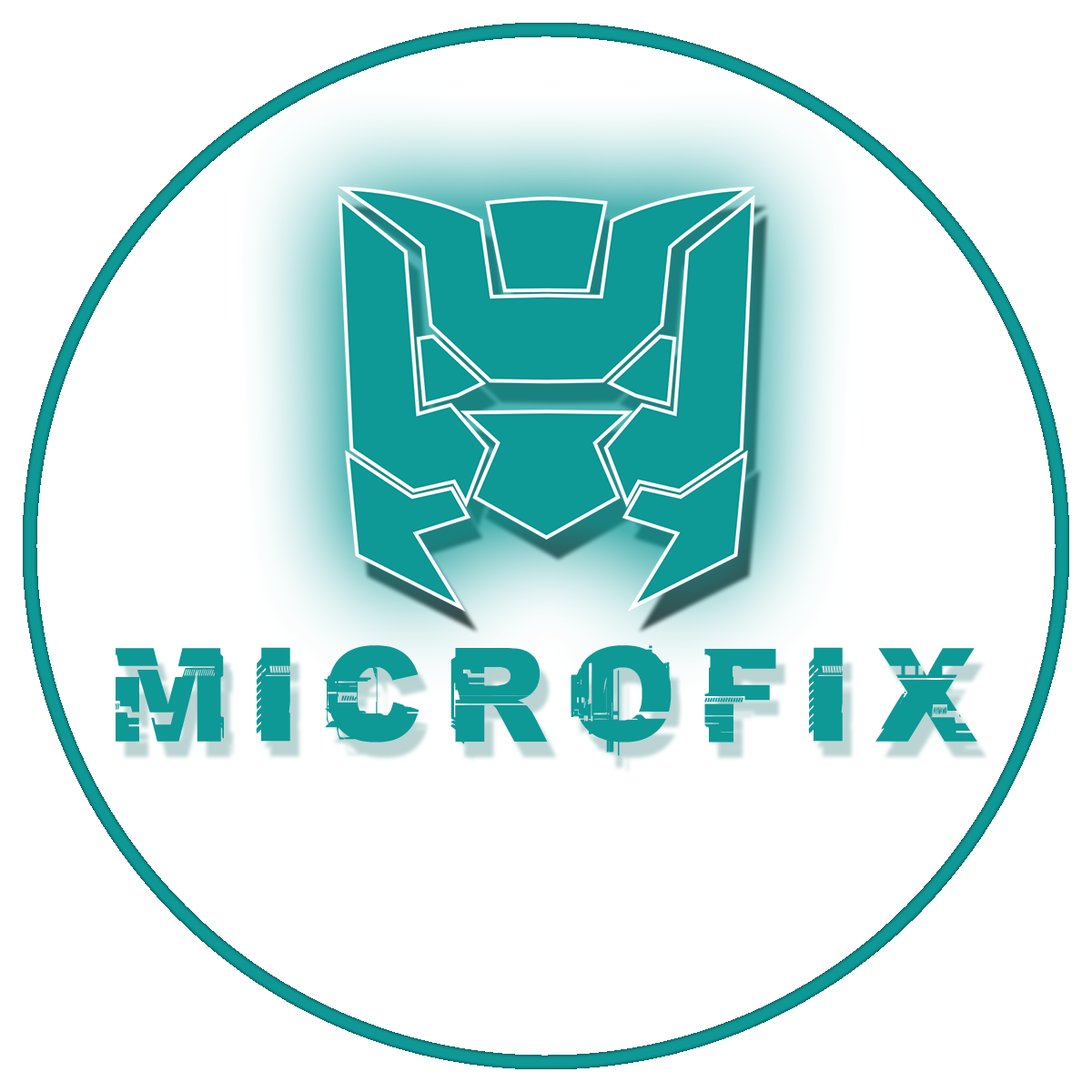
<style>
.page{position:relative;width:1092px;height:1092px;background:#ffffff}
.page>*{position:absolute;margin:0}
.t1{font:119px "CFGlitchCity-Regular";letter-spacing:0.2em;color:#0e9896}
</style>
<div class="page">
<p class="t1" style="left:115px;top:645px;width:862px;height:111px">MICROFIX</p>
</div>
